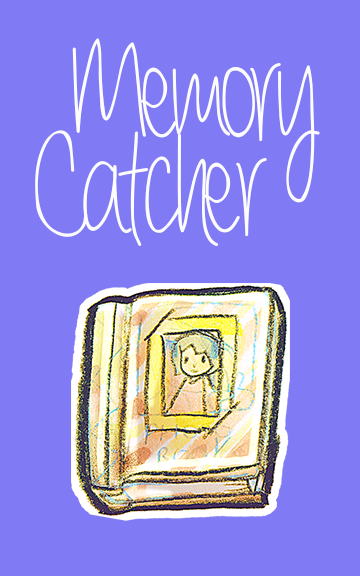
<style>
.page{position:relative;width:360px;height:576px;background:#807af4}
.page>*{position:absolute;margin:0}
.t1{font:150px "alwaysforever";letter-spacing:-0.05em;color:#fcfcfd}
</style>
<div class="page">
<p class="t1" style="left:72px;top:38px;width:248px;height:165px">Memory</p>
<p class="t1" style="left:35px;top:130px;width:232px;height:116px">Catcher</p>
</div>
